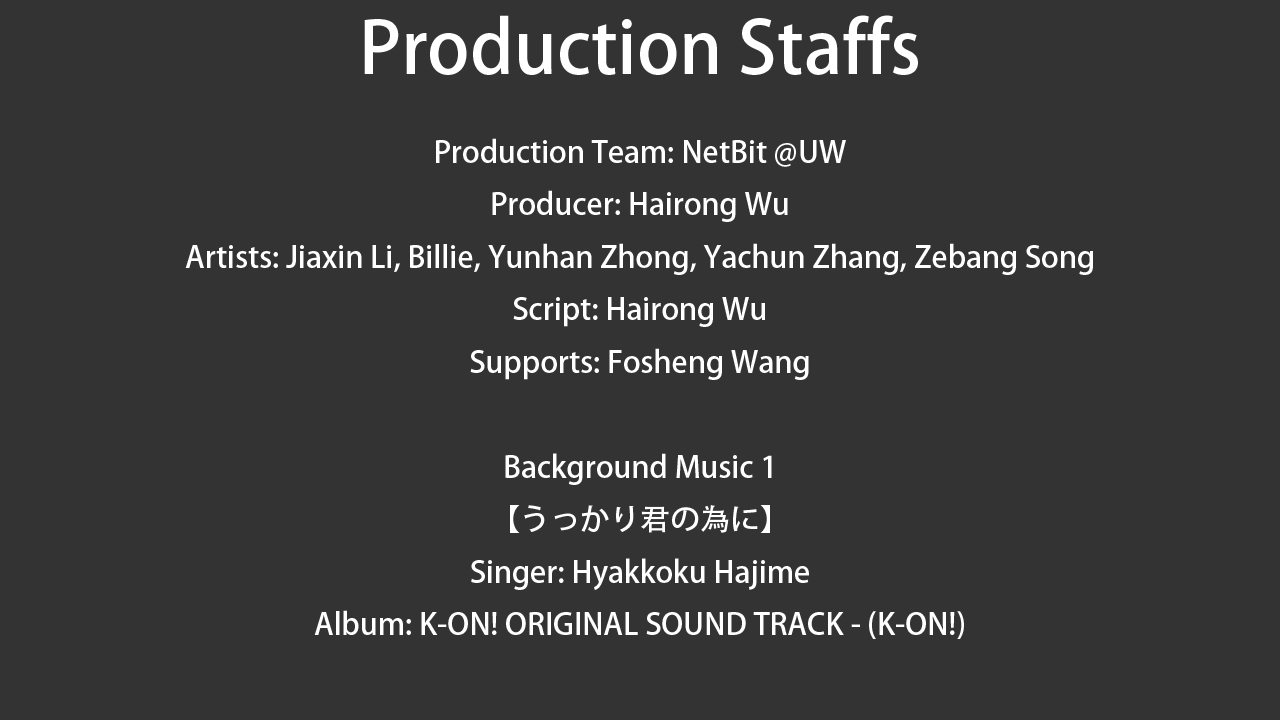
<style>
.page{position:relative;width:1280px;height:720px;background:#333333}
.page>*{position:absolute;margin:0}
.t1{font:30px "AdobeHeitiStd-Regular";color:#ffffff}
.t2{font:72px "AdobeHeitiStd-Regular";color:#ffffff}
</style>
<div class="page">
<p class="t1" style="left:185px;top:15px;width:909px;height:624px;text-align:center"><span class="t2">Production Staffs<br></span>Production Team: NetBit @UW<br>Producer: Hairong Wu<br>Artists: Jiaxin Li, Billie, Yunhan Zhong, Yachun Zhang, Zebang Song<br>Script: Hairong Wu<br>Supports: Fosheng Wang<br><br>Background Music 1<br>【うっかり君の為に】<br>Singer: Hyakkoku Hajime<br>Album: K-ON! ORIGINAL SOUND TRACK - (K-ON!)</p>
</div>
